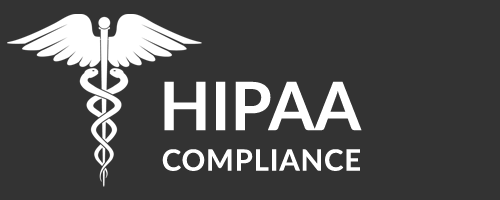
<style>
.page{position:relative;width:500px;height:200px;background:#333333}
.page>*{position:absolute;margin:0}
.t1{font:66.7px "Lato-Bold";color:#ffffff}
.t2{font:29.2px "Lato-Bold";letter-spacing:0.033em;color:#ffffff}
</style>
<div class="page">
<p class="t1" style="left:164px;top:81px;width:198px;height:50px">HIPAA</p>
<p class="t2" style="left:162px;top:149px;width:198px;height:22px">COMPLIANCE</p>
</div>
